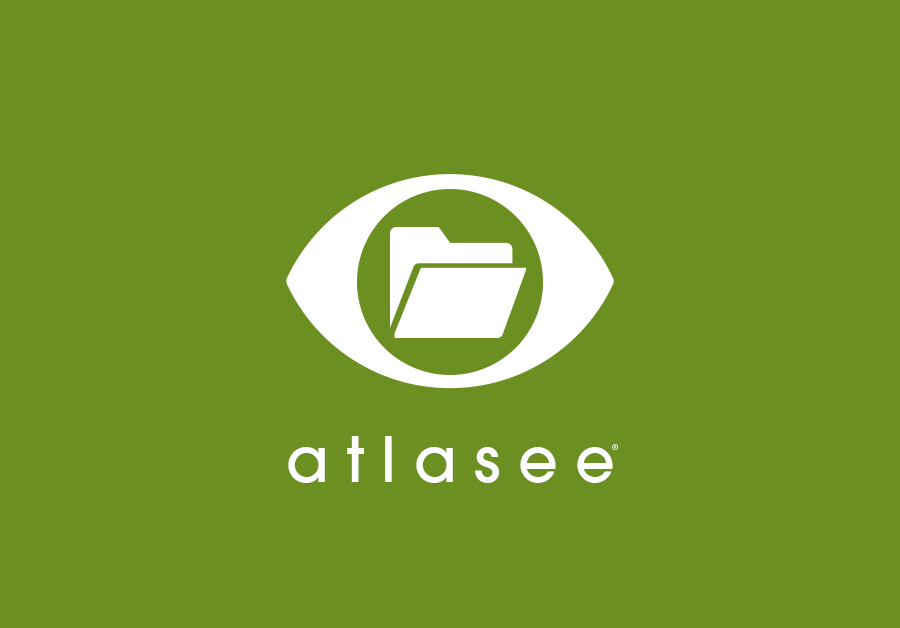
<style>
.page{position:relative;width:900px;height:628px;background:#6c8f21}
.page>*{position:absolute;margin:0}
.t1{font:62.5px "AvantGardeLT-Medium";letter-spacing:0.28em;color:#ffffff}
</style>
<div class="page">
<p class="t1" style="left:288px;top:436px;width:325px;height:47px">atlasee</p>
</div>
